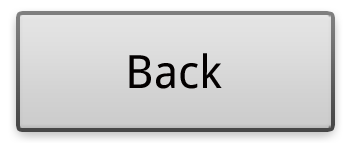
<style>
.page{position:relative;width:347px;height:143px}
.page>*{position:absolute;margin:0}
.t1{font:45.8px "DroidSans";color:#030000}
</style>
<div class="page">
<p class="t1" style="left:129px;top:53px;width:93px;height:36px">Back</p>
</div>
